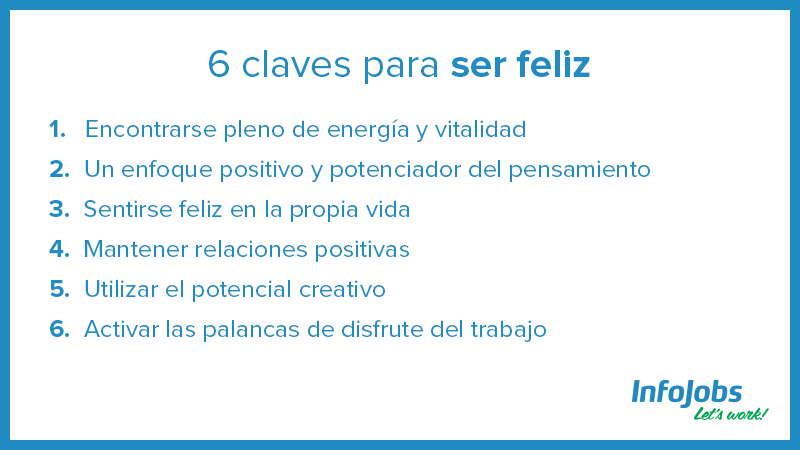
<style>
.page{position:relative;width:800px;height:450px;background:#ffffff}
.page>*{position:absolute;margin:0}
.t1{font:40px "ProximaNova-Regular";color:#208cc2}
.t2{font:40px "ProximaNova-Bold";color:#208cc2}
.t3{font:25px/40px "ProximaNova-Regular";color:#208cc2}
.t4{font:25px/40px "ProximaNova-Bold";color:#208cc2}
</style>
<div class="page">
<p class="t1" style="left:209px;top:50px;width:381px;height:34px">6 claves para <span class="t2">ser feliz</span></p>
<p class="t3" style="left:49px;top:119px;width:601px;height:223px"><span class="t4">1.</span>   Encontrarse pleno de energía y vitalidad<br><span class="t4">2.</span>  Un enfoque positivo y potenciador del pensamiento <br><span class="t4">3.</span>  Sentirse feliz en la propia vida<br><span class="t4">4.</span>  Mantener relaciones positivas<br><span class="t4">5.</span>  Utilizar el potencial creativo <br><span class="t4">6.</span>  Activar las palancas de disfrute del trabajo</p>
</div>
